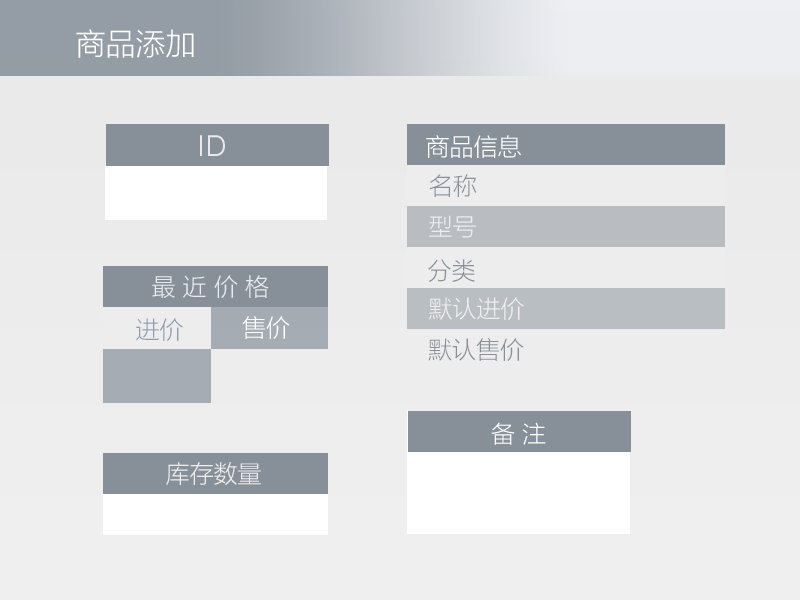
<style>
.page{position:relative;width:800px;height:600px}
.page>*{position:absolute;margin:0}
.t1{font:30px "MicrosoftYaHeiLight";color:#ffffff}
.t2{font:30px "SofiaProLight";color:#e9e9e9}
.t3{font:24px "MicrosoftYaHeiLight";color:#ffffff}
.t4{font:24px "MicrosoftYaHeiLight";color:#879099}
.t5{font:24px "MicrosoftYaHeiLight";color:#ededed}
.t6{font:24px "MicrosoftYaHeiLight";color:#e9ebed}
.t7{font:24px "MicrosoftYaHeiLight";color:#f2eeee}
.t8{font:23.6px "MicrosoftYaHeiLight";color:#ffffff}
</style>
<div class="page">
<p class="t1" style="left:76px;top:29px;width:118px;height:29px">商品添加</p>
<p class="t2" style="left:200px;top:135px;width:25px;height:21px">ID</p>
<p class="t3" style="left:426px;top:135px;width:95px;height:23px">商品信息</p>
<p class="t4" style="left:429px;top:174px;width:48px;height:23px">名称</p>
<p class="t5" style="left:429px;top:215px;width:47px;height:23px">型号</p>
<p class="t4" style="left:428px;top:259px;width:47px;height:23px">分类</p>
<p class="t6" style="left:152px;top:275px;width:117px;height:23px">最 近 价 格</p>
<p class="t7" style="left:429px;top:297px;width:95px;height:23px">默认进价</p>
<p class="t4" style="left:136px;top:318px;width:47px;height:23px">进价</p>
<p class="t3" style="left:242px;top:316px;width:48px;height:23px">售价</p>
<p class="t4" style="left:428px;top:338px;width:96px;height:23px">默认售价</p>
<p class="t8" style="left:491px;top:422px;width:55px;height:23px">备 注</p>
<p class="t5" style="left:166px;top:462px;width:95px;height:23px">库存数量</p>
</div>
